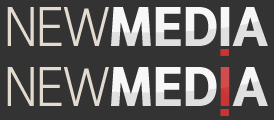
<style>
.page{position:relative;width:274px;height:120px;background:#333333}
.page>*{position:absolute;margin:0}
.t1{font:57.9px "IntervalSansPro-LightCond";color:#e3dbd0}
.t2{font:57.9px "IntervalSansPro-BoldCond";letter-spacing:0.008em;color:#e0e0e0}
.t3{font:57.9px "IntervalSansPro-BoldCond";color:#e0e0e0}
.t4{font:57.9px "IntervalSansPro-BoldCond";letter-spacing:0.008em;color:#cc3433}
</style>
<div class="page">
<p class="t1" style="left:7px;top:7px;width:102px;height:39px">NEW</p>
<p class="t2" style="left:111px;top:7px;width:157px;height:39px"><span class="t3">M</span>EDIA</p>
<p class="t1" style="left:7px;top:67px;width:102px;height:39px">NEW</p>
<p class="t2" style="left:111px;top:67px;width:157px;height:39px"><span class="t3">M</span>ED<span class="t4">I</span>A</p>
</div>
